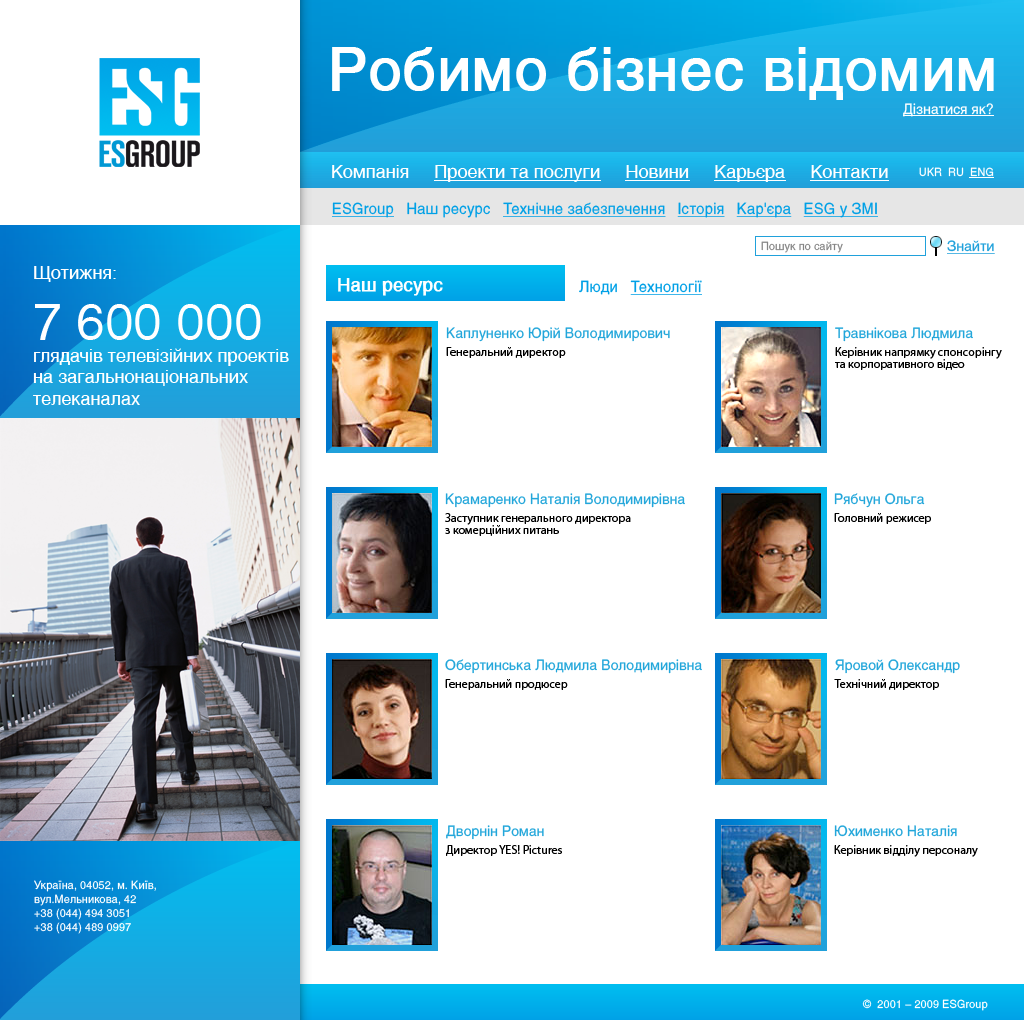
<style>
.page{position:relative;width:1024px;height:1020px;background:#ffffff}
.page>*{position:absolute;margin:0}
.t1{font:58px "Helios";color:#ffffff;font-weight:bold}
.t2{font:14px "Helios";color:#ffffff}
.t3{font:18px "Helios";color:#ffffff}
.t4{font:11px "Helios";color:#ffffff}
.t5{font:15px "Helios";color:#00a0e6;text-decoration:underline}
.t6{font:15px "Helios";color:#00a0e6}
.t7{font:11px "Helios";color:#858585}
.t8{font:14px "Helios";color:#20a1db;text-decoration:underline}
.t9{font:51px "Helios";color:#ffffff}
.t10{font:18px "Helios";color:#ffffff;font-weight:bold}
.t11{font:14px/18px "Helios";color:#22a6da}
.t12{font:12px/18px "MyriadPro-Regular";color:#000000}
.t13{font:12px/18px "MyriadPro-Regular";color:#010101}
.t14{font:12px/12px "MyriadPro-Regular";color:#010101}
.t15{font:12px/12px "MyriadPro-Regular";color:#000000}
.t16{font:11px/14px "Helios";color:#ffffff}
</style>
<div class="page">
<p class="t1" style="left:332px;top:47px;width:662px;height:53px">Робимо бізнес відомим</p>
<p class="t2" style="left:903px;top:103px;width:90px;height:14px">Дізнатися як?</p>
<p class="t3" style="left:332px;top:165px;width:556px;height:17px">Компанія     Проекти та послуги     Новини     Карьєра     Контакти</p>
<p class="t4" style="left:919px;top:167px;width:75px;height:10px">UKR  RU  ENG</p>
<p class="t5" style="left:332px;top:202px;width:546px;height:16px">ESGroup<span class="t6">   Наш ресурс   </span>Технічне забезпечення   Історія   Кар'єра   ESG у ЗМІ</p>
<p class="t7" style="left:761px;top:241px;width:82px;height:12px">Пошук по сайту</p>
<p class="t8" style="left:947px;top:240px;width:48px;height:14px">Знайти</p>
<p class="t3" style="left:33px;top:266px;width:256px;height:139px">Щотижня:<br><span class="t9">7 600 000 </span> глядачів телевізійних проектів на загальнонаціональних телеканалах</p>
<p class="t10" style="left:338px;top:278px;width:105px;height:18px">Наш ресурс</p>
<p class="t5" style="left:579px;top:280px;width:123px;height:15px"><span class="t6">Люди   </span>Технології</p>
<p class="t11" style="left:446px;top:327px;width:224px;height:31px">Каплуненко Юрій Володимирович<br><span class="t12">Генеральний директор</span></p>
<p class="t13" style="left:835px;top:327px;width:167px;height:43px"><span class="t11">Травнікова Людмила<br></span>Керівник напрямку спонсорінгу<br><span class="t14">та корпоративного відео</span></p>
<p class="t11" style="left:445px;top:493px;width:240px;height:43px">Крамаренко Наталія Володимирівна<br><span class="t12">Заступник генерального директора <br></span><span class="t15">з комерційних питань</span></p>
<p class="t13" style="left:834px;top:493px;width:97px;height:31px"><span class="t11">Рябчун Ольга<br></span>Головний режисер</p>
<p class="t11" style="left:445px;top:659px;width:257px;height:31px">Обертинська Людмила Володимирівна<br><span class="t12">Генеральний продюсер</span></p>
<p class="t12" style="left:834px;top:659px;width:126px;height:31px"><span class="t11">Яровой Олександр<br></span>Технічний директор</p>
<p class="t13" style="left:446px;top:825px;width:116px;height:31px"><span class="t11">Дворнін Роман<br></span>Директор YES! Pictures</p>
<p class="t12" style="left:834px;top:825px;width:144px;height:32px"><span class="t11">Юхименко Наталія<br></span>Керівник відділу персоналу</p>
<p class="t16" style="left:34px;top:880px;width:122px;height:54px">Україна, 04052, м. Київ, <br>вул.Мельникова, 42<br>+38 (044) 494 3051<br>+38 (044) 489 0997</p>
<p class="t4" style="left:862px;top:999px;width:126px;height:12px">©  2001 – 2009 ESGroup</p>
</div>
